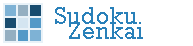
<style>
.page{position:relative;width:193px;height:46px;background:#ffffff}
.page>*{position:absolute;margin:0}
.t1{font:24px "Rockwell";color:#2980b9}
</style>
<div class="page">
<p class="t1" style="left:55px;top:7px;width:82px;height:17px">Sudoku</p>
<p class="t1" style="left:55px;top:7px;width:82px;height:17px">Sudoku</p>
<p class="t1" style="left:69px;top:22px;width:74px;height:17px">Zenkai</p>
<p class="t1" style="left:69px;top:22px;width:74px;height:17px">Zenkai</p>
</div>
